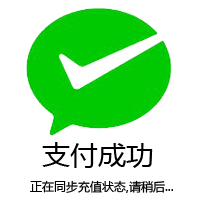
<style>
.page{position:relative;width:200px;height:200px;background:#ffffff}
.page>*{position:absolute;margin:0}
.t1{font:28px "MicrosoftYaHei";color:#000000}
.t2{font:12px "MicrosoftYaHei";color:#000000}
</style>
<div class="page">
<p class="t1" style="left:42px;top:142px;width:111px;height:26px">支付成功</p>
<p class="t2" style="left:30px;top:180px;width:143px;height:13px">正在同步充值状态,请稍后...</p>
</div>
